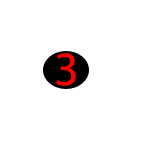
<style>
.page{position:relative;width:150px;height:150px;background:#ffffff}
.page>*{position:absolute;margin:0}
.t1{font:48px "MyriadPro-Regular";color:#fe0000}
</style>
<div class="page">
<p class="t1" style="left:56px;top:53px;width:20px;height:33px">3</p>
</div>
